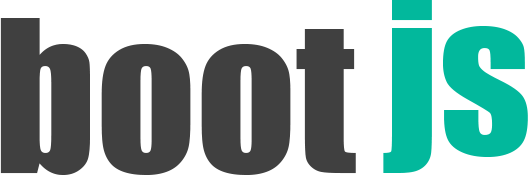
<style>
.page{position:relative;width:528px;height:175px;background:#ffffff}
.page>*{position:absolute;margin:0}
.t1{font:195.8px "Impact";color:#02b89c}
.t2{font:195.8px "Impact";color:#404040}
</style>
<div class="page">
<p class="t1" style="left:383px;top:0px;width:145px;height:173px">js</p>
<p class="t2" style="left:0px;top:18px;width:356px;height:157px">boot</p>
</div>
